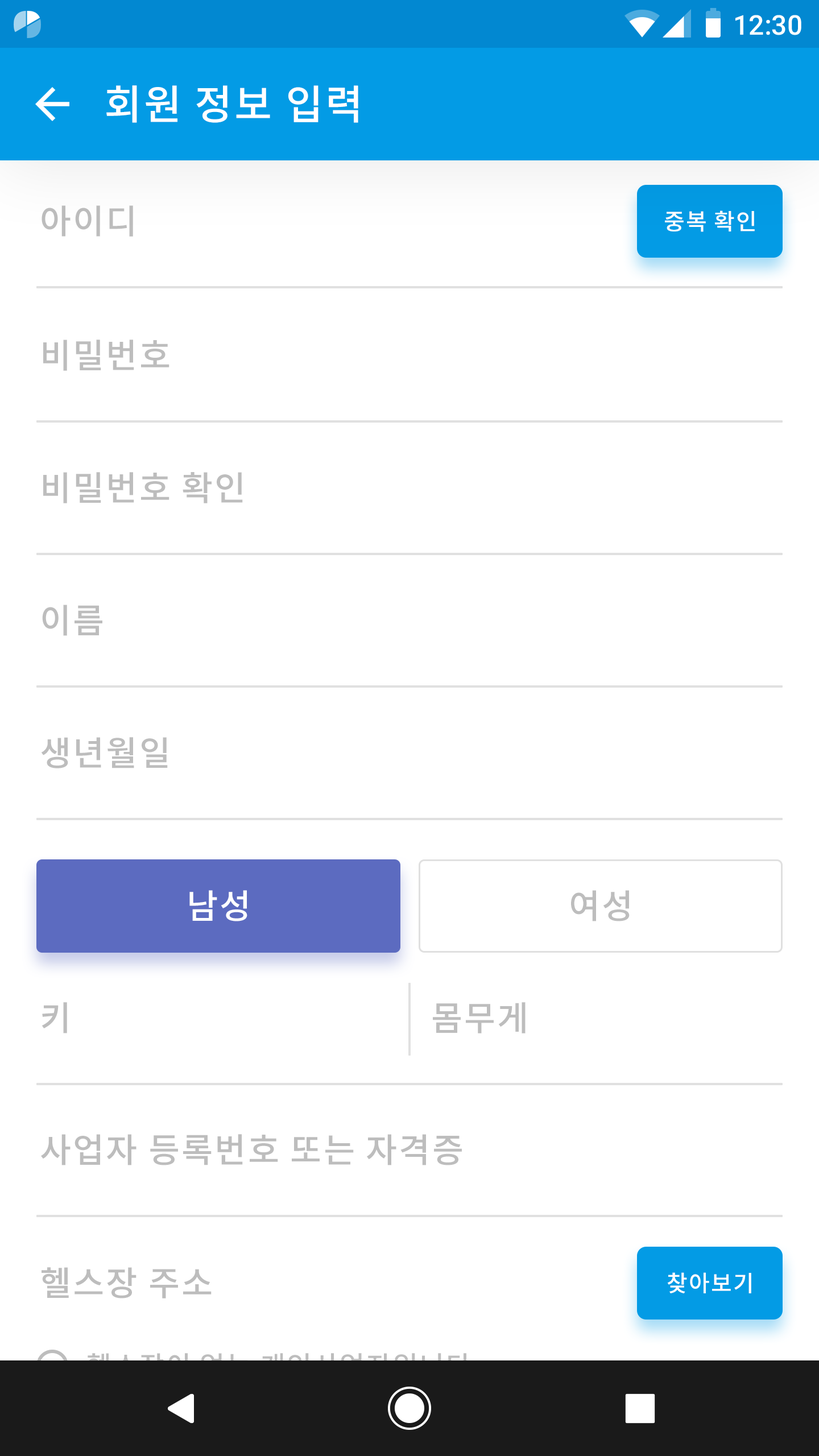
<style>
.page{position:relative;width:819px;height:1456px;background:#ffffff}
.page>*{position:absolute;margin:0}
.t1{font:27.3px "Roboto-Medium";color:#ffffff}
.t2{font:40.9px "NotoSansCJKkr-Medium";letter-spacing:0.05em;color:#ffffff}
.t3{font:34.1px "NotoSansCJKkr-Medium";letter-spacing:0.05em;color:#bdbdbd}
.t4{font:22.7px "NotoSansCJKkr-Medium";letter-spacing:0.05em;color:#ffffff}
.t5{font:34.1px "NotoSansCJKkr-Medium";letter-spacing:0.05em;color:#ffffff}
</style>
<div class="page">
<p class="t1" style="left:735px;top:15px;width:66px;height:20px">12:30</p>
<p class="t2" style="left:106px;top:85px;width:252px;height:38px">회원 정보 입력</p>
<p class="t3" style="left:42px;top:205px;width:91px;height:32px">아이디</p>
<p class="t4" style="left:665px;top:210px;width:90px;height:22px">중복 확인</p>
<p class="t3" style="left:43px;top:340px;width:126px;height:31px">비밀번호</p>
<p class="t3" style="left:43px;top:472px;width:200px;height:31px">비밀번호 확인</p>
<p class="t3" style="left:42px;top:605px;width:60px;height:31px">이름</p>
<p class="t3" style="left:41px;top:737px;width:127px;height:31px">생년월일</p>
<p class="t5" style="left:189px;top:890px;width:58px;height:31px">남성</p>
<p class="t3" style="left:571px;top:890px;width:59px;height:31px">여성</p>
<p class="t3" style="left:42px;top:1002px;width:25px;height:31px">키</p>
<p class="t3" style="left:433px;top:1002px;width:93px;height:31px">몸무게</p>
<p class="t3" style="left:41px;top:1134px;width:421px;height:31px">사업자 등록번호 또는 자격증</p>
<p class="t3" style="left:42px;top:1267px;width:170px;height:31px">헬스장 주소</p>
<p class="t4" style="left:667px;top:1272px;width:84px;height:21px">찾아보기</p>
</div>
